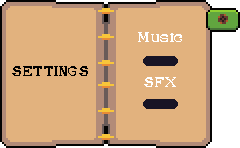
<style>
.page{position:relative;width:240px;height:148px;background:#e2b27e}
.page>*{position:absolute;margin:0}
.t1{font:15.2px "OfMiceAndCats";color:#ffffff}
.t2{font:15.2px "OfMiceAndCats";color:#000000}
</style>
<div class="page">
<p class="t1" style="left:138px;top:32px;width:44px;height:10px">Music</p>
<p class="t2" style="left:12px;top:66px;width:76px;height:10px">SETTINGS</p>
<p class="t1" style="left:144px;top:77px;width:32px;height:10px">SFX</p>
</div>
